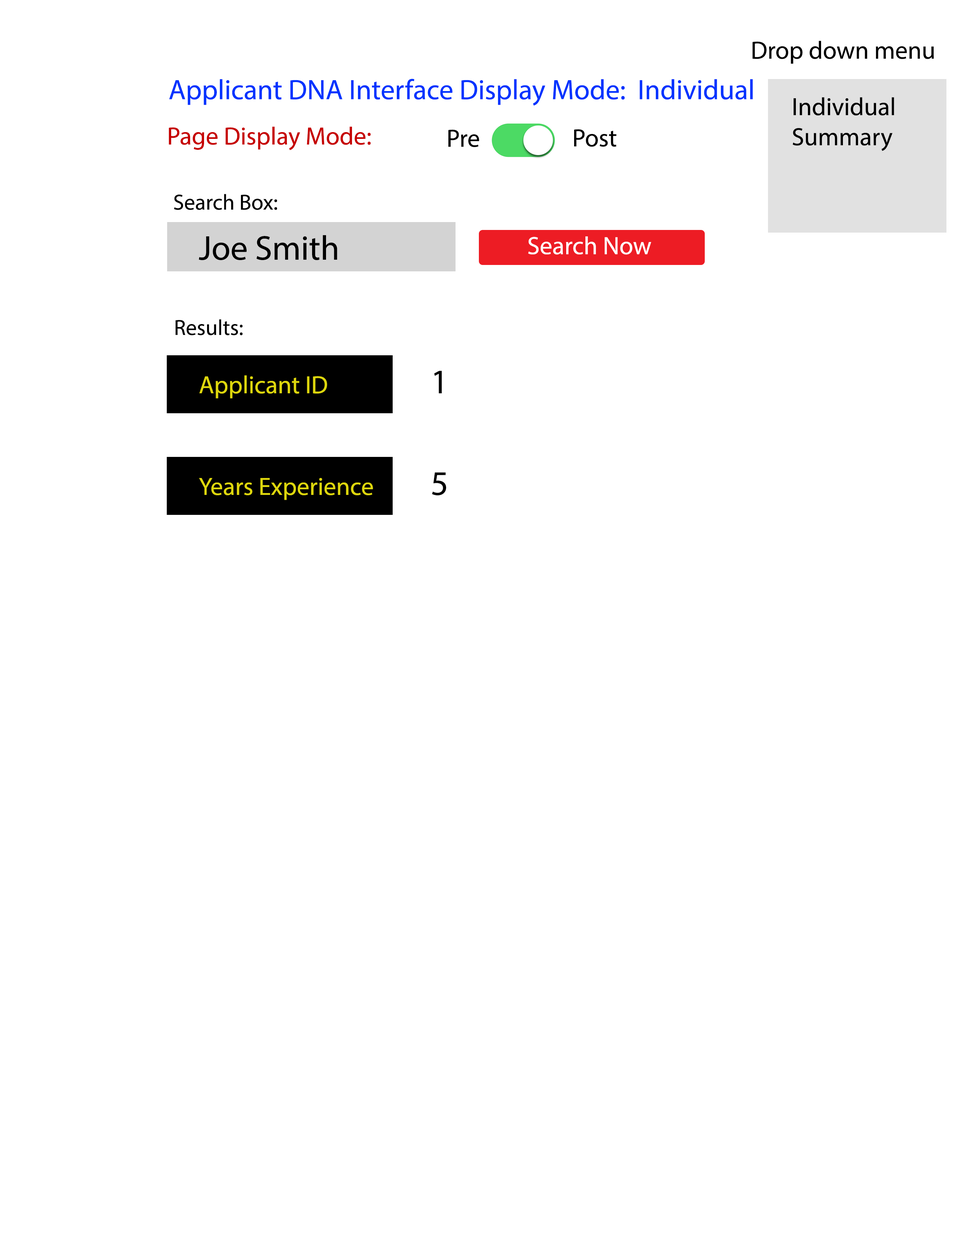
<style>
.page{position:relative;width:960px;height:1242px;background:#ffffff}
.page>*{position:absolute;margin:0}
.t1{font:25.1px "MyriadPro-Regular";color:#000000}
.t2{font:28.2px "MyriadPro-Regular";color:#0033ff}
.t3{font:25.1px "MyriadPro-Regular";color:#c60000}
.t4{font:22px "MyriadPro-Regular";color:#000000}
.t5{font:34.5px "MyriadPro-Regular";color:#000000}
.t6{font:25.1px "MyriadPro-Regular";color:#ffffff}
.t7{font:25.1px "MyriadPro-Regular";color:#ded70d}
</style>
<div class="page">
<p class="t1" style="left:752px;top:41px;width:182px;height:23px">Drop down menu</p>
<p class="t2" style="left:169px;top:79px;width:584px;height:27px">Applicant DNA Interface Display Mode:  Individual</p>
<p class="t1" style="left:792px;top:97px;width:102px;height:54px">Individual<br>Summary</p>
<p class="t3" style="left:169px;top:126px;width:202px;height:24px">Page Display Mode:</p>
<p class="t1" style="left:448px;top:129px;width:31px;height:18px">Pre</p>
<p class="t1" style="left:574px;top:129px;width:43px;height:18px">Post</p>
<p class="t4" style="left:174px;top:194px;width:103px;height:16px">Search Box:</p>
<p class="t5" style="left:199px;top:235px;width:138px;height:25px">Joe Smith</p>
<p class="t6" style="left:528px;top:236px;width:123px;height:19px">Search Now</p>
<p class="t4" style="left:175px;top:319px;width:68px;height:16px">Results:</p>
<p class="t7" style="left:199px;top:375px;width:128px;height:24px">Applicant ID</p>
<p class="t5" style="left:434px;top:371px;width:8px;height:22px">1</p>
<p class="t5" style="left:432px;top:472px;width:14px;height:24px">5</p>
<p class="t7" style="left:199px;top:478px;width:174px;height:22px">Years Experience</p>
</div>
